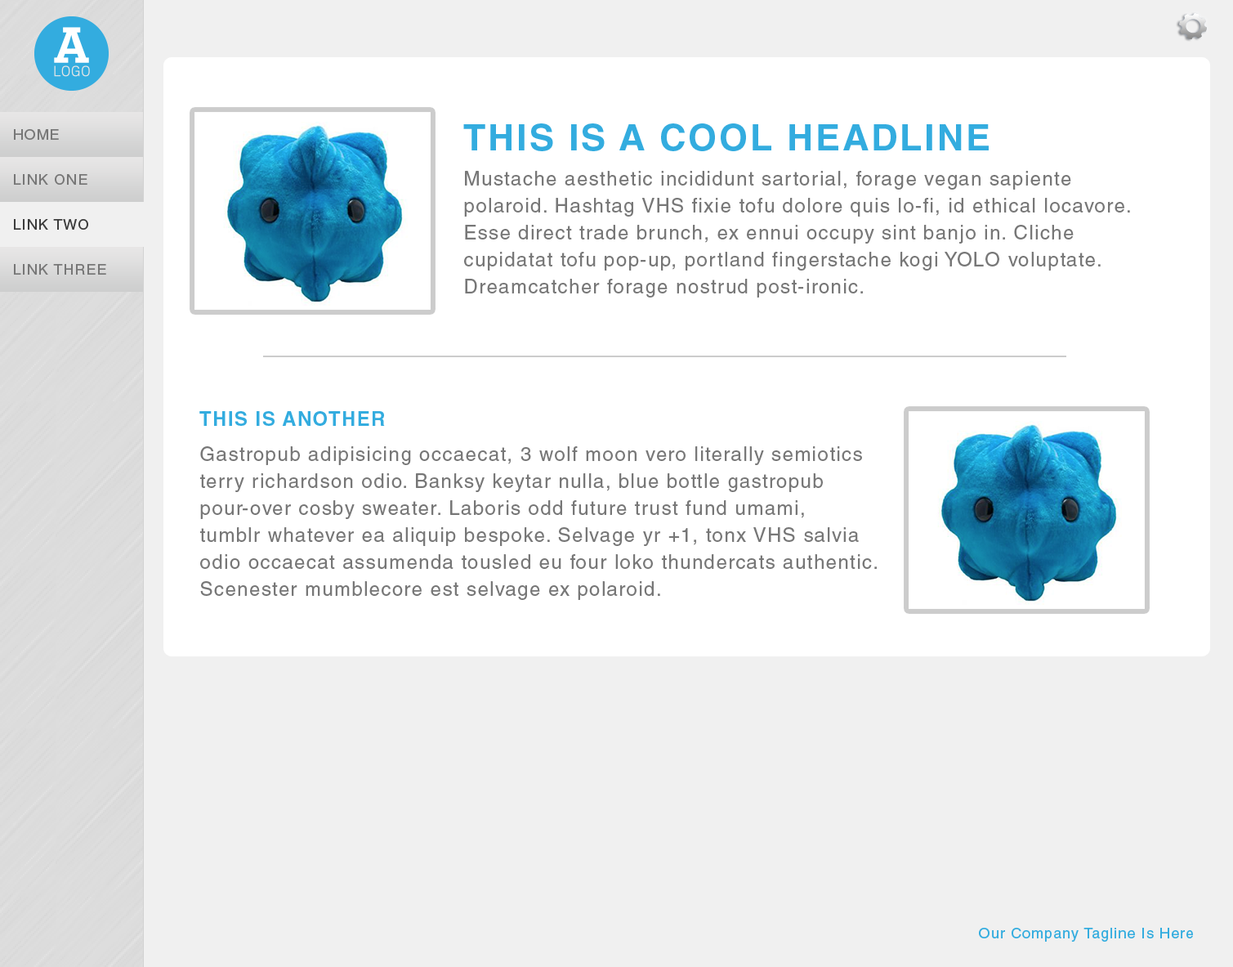
<style>
.page{position:relative;width:1233px;height:967px;background:#ffffff}
.page>*{position:absolute;margin:0}
.t1{font:36.8px "HelveticaLTStd-Bold";letter-spacing:0.06em;color:#33acdf;text-transform:uppercase}
.t2{font:14.7px "HelveticaLTStd-Roman";letter-spacing:0.06em;color:#777777}
.t3{font:19.6px/27px "HelveticaLTStd-Roman";letter-spacing:0.06em;color:#777777}
.t4{font:14.7px "HelveticaLTStd-Roman";letter-spacing:0.06em;color:#3c3c3c}
.t5{font:19.6px "HelveticaLTStd-Bold";letter-spacing:0.06em;color:#33acdf;text-transform:uppercase}
.t6{font:14.7px "HelveticaLTStd-Roman";letter-spacing:0.06em;color:#33acdf}
</style>
<div class="page">
<p class="t1" style="left:463px;top:123px;width:526px;height:28px">This Is A Cool Headline</p>
<p class="t2" style="left:14px;top:129px;width:45px;height:11px">HOME</p>
<p class="t3" style="left:464px;top:171px;width:666px;height:126px">Mustache aesthetic incididunt sartorial, forage vegan sapiente <br>polaroid. Hashtag VHS fixie tofu dolore quis lo-fi, id ethical locavore. <br>Esse direct trade brunch, ex ennui occupy sint banjo in. Cliche <br>cupidatat tofu pop-up, portland fingerstache kogi YOLO voluptate. <br>Dreamcatcher forage nostrud post-ironic.</p>
<p class="t2" style="left:14px;top:174px;width:73px;height:11px">LINK ONE</p>
<p class="t4" style="left:14px;top:219px;width:74px;height:11px">LINK TWO</p>
<p class="t2" style="left:14px;top:264px;width:92px;height:11px">LINK THREE</p>
<p class="t5" style="left:199px;top:411px;width:186px;height:15px">This Is ANOTHER</p>
<p class="t3" style="left:199px;top:446px;width:678px;height:154px">Gastropub adipisicing occaecat, 3 wolf moon vero literally semiotics <br>terry richardson odio. Banksy keytar nulla, blue bottle gastropub <br>pour-over cosby sweater. Laboris odd future trust fund umami, <br>tumblr whatever ea aliquip bespoke. Selvage yr +1, tonx VHS salvia <br>odio occaecat assumenda tousled eu four loko thundercats authentic. <br>Scenester mumblecore est selvage ex polaroid.</p>
<p class="t6" style="left:979px;top:928px;width:214px;height:14px">Our Company Tagline Is Here</p>
</div>
